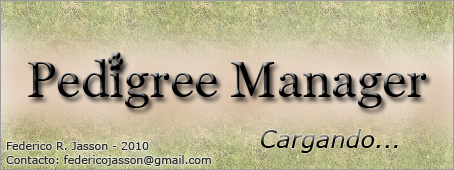
<style>
.page{position:relative;width:454px;height:170px}
.page>*{position:absolute;margin:0}
.t1{font:24px "Verdana-Italic"}
.t2{font:11px "Verdana";color:#292929}
</style>
<div class="page">
<p class="t1" style="left:260px;top:129px;width:138px;height:24px">Cargando...</p>
<p class="t2" style="left:6px;top:141px;width:205px;height:25px">Federico R. Jasson - 2010<br>Contacto: federicojasson@gmail.com</p>
</div>
